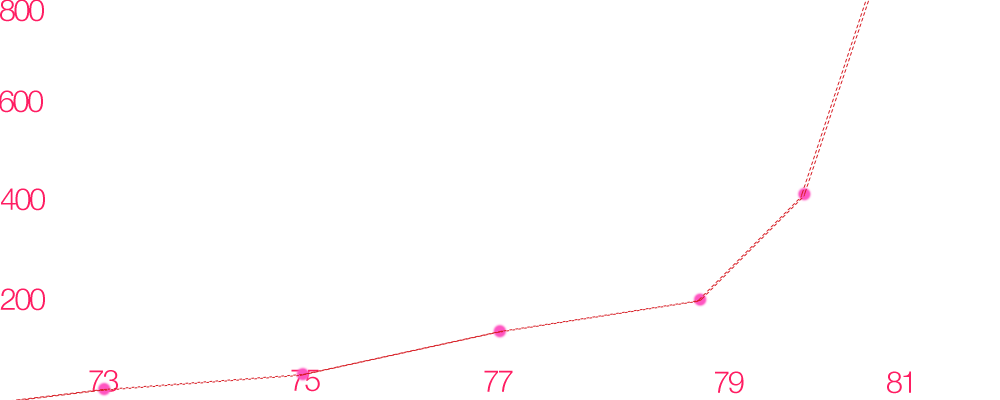
<style>
.page{position:relative;width:1000px;height:400px;background:#ffffff}
.page>*{position:absolute;margin:0}
.t1{font:30.2px "HelveticaNeue-Light";letter-spacing:-0.075em;color:#ff1d62}
.t2{font:30px "HelveticaNeue-Light";letter-spacing:-0.075em;color:#ff1d62}
</style>
<div class="page">
<p class="t1" style="left:0px;top:0px;width:44px;height:22px">800</p>
<p class="t1" style="left:0px;top:90px;width:43px;height:23px">600</p>
<p class="t1" style="left:1px;top:188px;width:44px;height:23px">400</p>
<p class="t1" style="left:0px;top:288px;width:45px;height:23px">200</p>
<p class="t2" style="left:89px;top:370px;width:29px;height:22px">73</p>
<p class="t1" style="left:291px;top:369px;width:29px;height:23px">75</p>
<p class="t1" style="left:484px;top:370px;width:29px;height:22px">77</p>
<p class="t1" style="left:715px;top:371px;width:29px;height:23px">79</p>
<p class="t1" style="left:887px;top:371px;width:24px;height:23px">81</p>
</div>
